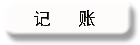
<style>
.page{position:relative;width:140px;height:45px;background:#fefbfb}
.page>*{position:absolute;margin:0}
.t1{font:18px "SimHei";color:#080707}
</style>
<div class="page">
<p class="t1" style="left:34px;top:10px;width:61px;height:17px">记   账</p>
</div>
